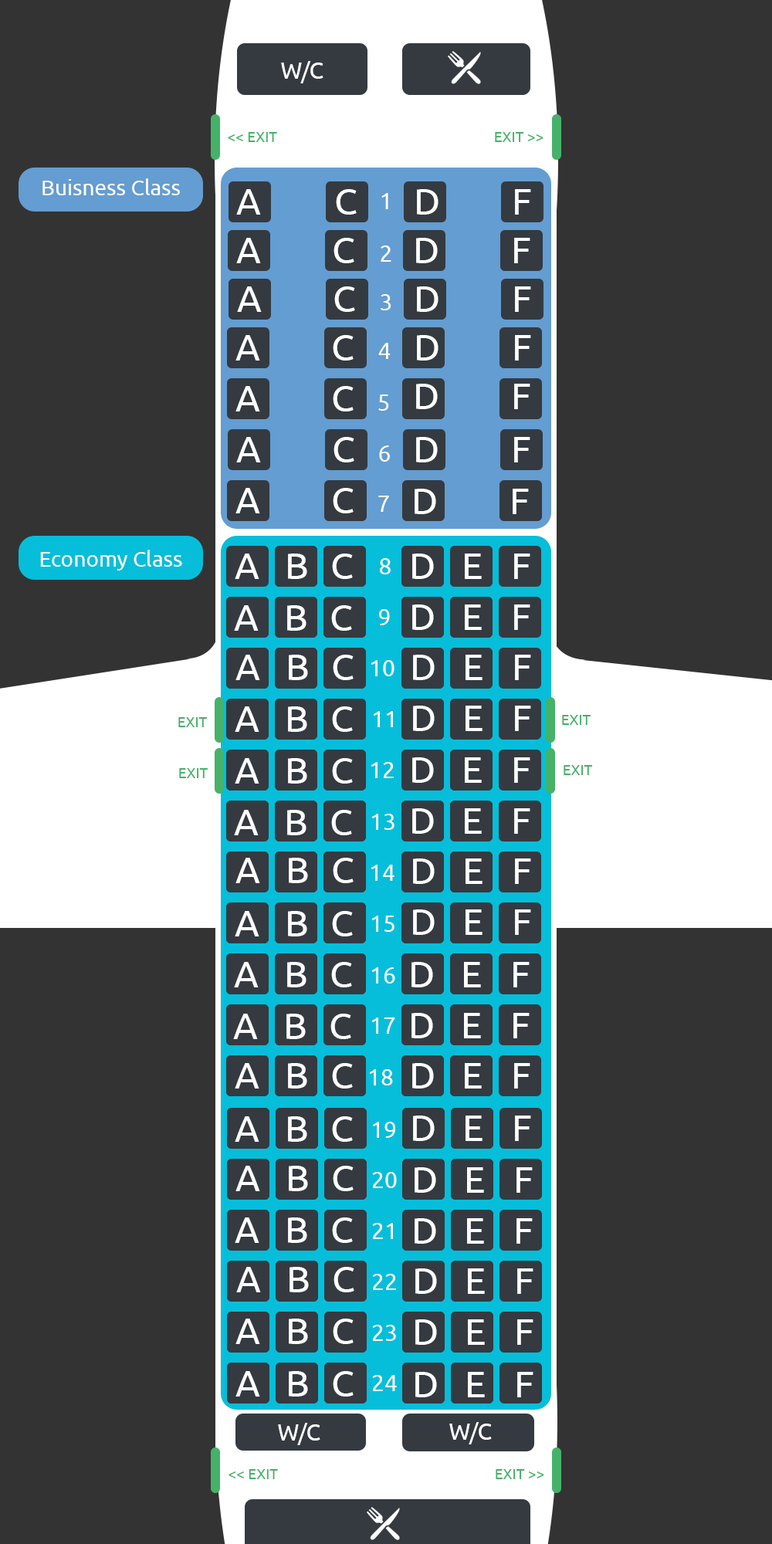
<style>
.page{position:relative;width:772px;height:1544px;background:#333333}
.page>*{position:absolute;margin:0}
.t1{font:23.2px "Ubuntu";color:#ffffff}
.t2{font:14.7px "Ubuntu";color:#000000}
.t3{font:14.7px "Ubuntu";color:#46b269}
.t4{font:21.6px "Ubuntu";color:#ffffff}
.t5{font:37.1px "Ubuntu";color:#ffffff}
.t6{font:37.1px "Ubuntu"}
</style>
<div class="page">
<p class="t1" style="left:281px;top:61px;width:43px;height:22px"><span class="t2"> <br></span>W/C</p>
<p class="t3" style="left:228px;top:132px;width:49px;height:10px">&lt;&lt; EXIT</p>
<p class="t3" style="left:495px;top:132px;width:49px;height:10px">EXIT &gt;&gt;</p>
<p class="t4" style="left:42px;top:178px;width:138px;height:17px">Buisness Class</p>
<p class="t5" style="left:236px;top:189px;width:121px;height:26px">A         C</p>
<p class="t1" style="left:381px;top:193px;width:7px;height:16px">1</p>
<p class="t5" style="left:417px;top:189px;width:114px;height:26px">D         F</p>
<p class="t6" style="left:236px;top:238px;width:118px;height:25px">A   B   C</p>
<p class="t1" style="left:381px;top:246px;width:10px;height:16px">2</p>
<p class="t5" style="left:416px;top:238px;width:114px;height:25px">D         F</p>
<p class="t6" style="left:237px;top:286px;width:118px;height:26px">A   B   C</p>
<p class="t5" style="left:417px;top:286px;width:114px;height:26px">D         F</p>
<p class="t1" style="left:381px;top:294px;width:10px;height:16px">3</p>
<p class="t6" style="left:236px;top:335px;width:118px;height:26px">A   B   C</p>
<p class="t5" style="left:417px;top:335px;width:114px;height:26px">D         F</p>
<p class="t1" style="left:378px;top:343px;width:13px;height:16px">4</p>
<p class="t6" style="left:236px;top:386px;width:118px;height:26px">A   B   C</p>
<p class="t5" style="left:416px;top:384px;width:114px;height:25px">D         F</p>
<p class="t1" style="left:378px;top:395px;width:11px;height:16px">5</p>
<p class="t6" style="left:236px;top:437px;width:118px;height:26px">A   B   C</p>
<p class="t5" style="left:416px;top:437px;width:114px;height:26px">D         F</p>
<p class="t1" style="left:379px;top:446px;width:11px;height:16px">6</p>
<p class="t6" style="left:236px;top:488px;width:118px;height:25px">A   B   C</p>
<p class="t1" style="left:378px;top:496px;width:11px;height:16px">7</p>
<p class="t5" style="left:415px;top:489px;width:114px;height:25px">D         F</p>
<p class="t4" style="left:40px;top:550px;width:142px;height:21px">Economy Class</p>
<p class="t5" style="left:235px;top:554px;width:118px;height:25px">A   B   C</p>
<p class="t5" style="left:412px;top:554px;width:118px;height:25px">D   E    F</p>
<p class="t1" style="left:380px;top:558px;width:11px;height:16px">8</p>
<p class="t5" style="left:234px;top:605px;width:118px;height:26px">A   B   C</p>
<p class="t5" style="left:412px;top:605px;width:118px;height:25px">D   E    F</p>
<p class="t1" style="left:379px;top:609px;width:11px;height:16px">9</p>
<p class="t5" style="left:236px;top:655px;width:118px;height:25px">A   B   C</p>
<p class="t1" style="left:371px;top:660px;width:24px;height:16px">10</p>
<p class="t5" style="left:413px;top:655px;width:118px;height:25px">D   E    F</p>
<p class="t5" style="left:235px;top:707px;width:118px;height:25px">A   B   C</p>
<p class="t1" style="left:373px;top:711px;width:20px;height:16px">11</p>
<p class="t5" style="left:413px;top:706px;width:118px;height:25px">D   E    F</p>
<p class="t3" style="left:178px;top:717px;width:29px;height:10px">EXIT</p>
<p class="t3" style="left:562px;top:715px;width:29px;height:10px">EXIT</p>
<p class="t5" style="left:235px;top:758px;width:118px;height:26px">A   B   C</p>
<p class="t5" style="left:412px;top:757px;width:118px;height:26px">D   E    F</p>
<p class="t3" style="left:179px;top:768px;width:29px;height:10px">EXIT</p>
<p class="t1" style="left:371px;top:762px;width:23px;height:16px">12</p>
<p class="t3" style="left:564px;top:765px;width:28px;height:10px">EXIT</p>
<p class="t5" style="left:234px;top:810px;width:118px;height:25px">A   B   C</p>
<p class="t5" style="left:412px;top:808px;width:118px;height:26px">D   E    F</p>
<p class="t1" style="left:371px;top:814px;width:24px;height:16px">13</p>
<p class="t5" style="left:236px;top:858px;width:118px;height:25px">A   B   C</p>
<p class="t1" style="left:371px;top:865px;width:24px;height:16px">14</p>
<p class="t5" style="left:413px;top:859px;width:118px;height:25px">D   E    F</p>
<p class="t5" style="left:235px;top:911px;width:118px;height:26px">A   B   C</p>
<p class="t1" style="left:371px;top:916px;width:24px;height:16px">15</p>
<p class="t5" style="left:413px;top:910px;width:118px;height:25px">D   E    F</p>
<p class="t5" style="left:234px;top:962px;width:118px;height:26px">A   B   C</p>
<p class="t5" style="left:412px;top:962px;width:118px;height:26px">D   E    F</p>
<p class="t1" style="left:371px;top:968px;width:24px;height:16px">16</p>
<p class="t5" style="left:233px;top:1014px;width:118px;height:25px">A   B   C</p>
<p class="t5" style="left:412px;top:1013px;width:118px;height:26px">D   E    F</p>
<p class="t1" style="left:371px;top:1018px;width:24px;height:16px">17</p>
<p class="t5" style="left:235px;top:1063px;width:118px;height:26px">A   B   C</p>
<p class="t1" style="left:369px;top:1069px;width:24px;height:17px">18</p>
<p class="t5" style="left:412px;top:1063px;width:118px;height:26px">D   E    F</p>
<p class="t5" style="left:235px;top:1117px;width:118px;height:25px">A   B   C</p>
<p class="t1" style="left:372px;top:1122px;width:23px;height:16px">19</p>
<p class="t5" style="left:413px;top:1116px;width:118px;height:25px">D   E    F</p>
<p class="t5" style="left:236px;top:1166px;width:118px;height:25px">A   B   C</p>
<p class="t5" style="left:415px;top:1167px;width:118px;height:26px">D   E    F</p>
<p class="t1" style="left:372px;top:1172px;width:25px;height:16px">20</p>
<p class="t5" style="left:235px;top:1218px;width:118px;height:25px">A   B   C</p>
<p class="t1" style="left:372px;top:1223px;width:21px;height:16px">21</p>
<p class="t5" style="left:415px;top:1218px;width:118px;height:26px">D   E    F</p>
<p class="t5" style="left:236px;top:1267px;width:118px;height:26px">A   B   C</p>
<p class="t1" style="left:372px;top:1274px;width:24px;height:16px">22</p>
<p class="t5" style="left:415px;top:1269px;width:119px;height:25px">D   E    F</p>
<p class="t5" style="left:236px;top:1319px;width:118px;height:25px">A   B   C</p>
<p class="t1" style="left:372px;top:1325px;width:24px;height:16px">23</p>
<p class="t5" style="left:415px;top:1320px;width:119px;height:25px">D   E    F</p>
<p class="t5" style="left:236px;top:1371px;width:118px;height:26px">A   B   C</p>
<p class="t5" style="left:415px;top:1372px;width:119px;height:26px">D   E    F</p>
<p class="t1" style="left:372px;top:1375px;width:25px;height:16px">24</p>
<p class="t1" style="left:278px;top:1423px;width:42px;height:22px"><span class="t2"> <br></span>W/C</p>
<p class="t1" style="left:449px;top:1422px;width:43px;height:23px"><span class="t2"> <br></span>W/C</p>
<p class="t3" style="left:229px;top:1469px;width:49px;height:10px">&lt;&lt; EXIT</p>
<p class="t3" style="left:496px;top:1469px;width:48px;height:10px">EXIT &gt;&gt;</p>
</div>
